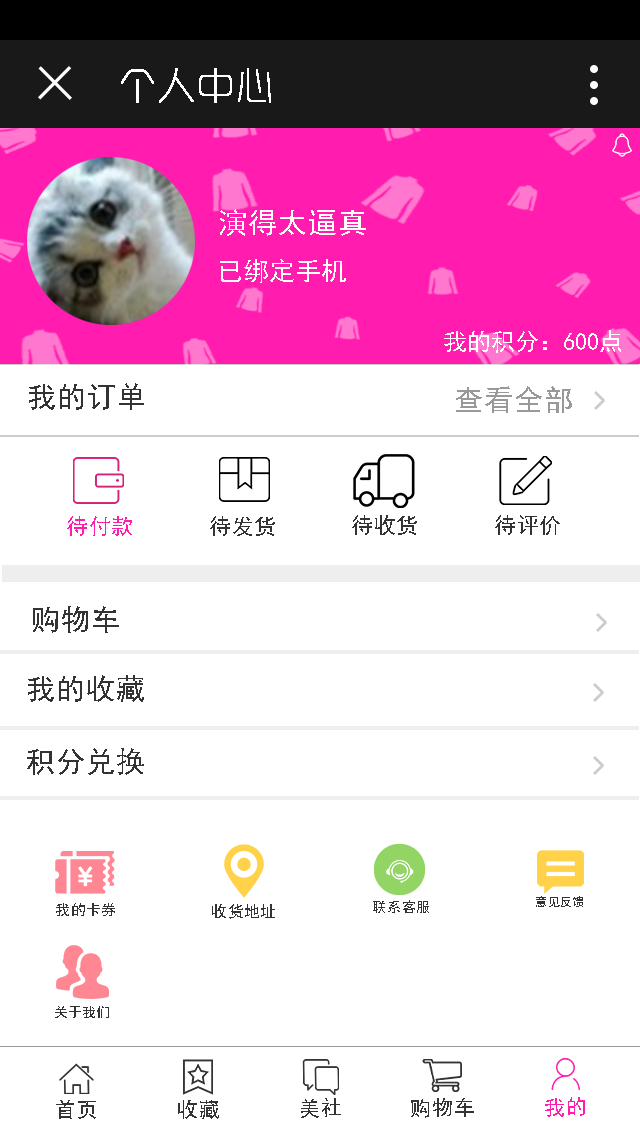
<style>
.page{position:relative;width:640px;height:1136px;background:#ffffff}
.page>*{position:absolute;margin:0}
.t1{font:38px "RTWSYueGoG0v1-ExLight";color:#ffffff;font-weight:bold}
.t2{font:50px "SimHei";color:#ffffff}
.t3{font:26px "SimHei";color:#ffffff}
.t4{font:24px "SimHei";color:#ffffff}
.t5{font:50px "SimHei";color:#333333}
.t6{font:50px "SimHei";color:#999999}
.t7{font:37.6px "SimHei";color:#ff1cae}
.t8{font:37.5px "SimHei";color:#333333}
.t9{font:37.4px "SimHei";color:#333333}
.t10{font:25.2px "SimHei";color:#333333}
.t11{font:27.1px "SimHei";color:#333333}
.t12{font:24.3px "SimHei";color:#333333}
.t13{font:20.3px "SimHei";color:#333333}
.t14{font:23.6px "SimHei";color:#333333}
.t15{font:36px "SimHei";color:#ff1cae}
.t16{font:36px "SimHei";color:#333333}
</style>
<div class="page">
<p class="t1" style="left:121px;top:68px;width:150px;height:35px">个人中心</p>
<p class="t2" style="left:220px;top:209px;width:146px;height:27px">演得太逼真</p>
<p class="t3" style="left:220px;top:259px;width:126px;height:24px">已绑定手机</p>
<p class="t4" style="left:444px;top:330px;width:177px;height:23px">我的积分：600点</p>
<p class="t5" style="left:29px;top:383px;width:115px;height:27px">我的订单</p>
<p class="t6" style="left:456px;top:386px;width:116px;height:27px">查看全部</p>
<p class="t7" style="left:67px;top:516px;width:65px;height:20px">待付款</p>
<p class="t8" style="left:210px;top:516px;width:65px;height:20px">待发货</p>
<p class="t8" style="left:352px;top:515px;width:65px;height:20px">待收货</p>
<p class="t9" style="left:495px;top:515px;width:65px;height:20px">待评价</p>
<p class="t5" style="left:33px;top:606px;width:86px;height:27px">购物车</p>
<p class="t5" style="left:28px;top:675px;width:116px;height:27px">我的收藏</p>
<p class="t5" style="left:27px;top:748px;width:117px;height:27px">积分兑换</p>
<p class="t10" style="left:56px;top:903px;width:59px;height:13px">我的卡券</p>
<p class="t11" style="left:212px;top:904px;width:63px;height:15px">收货地址</p>
<p class="t12" style="left:373px;top:900px;width:56px;height:13px">联系客服</p>
<p class="t13" style="left:536px;top:896px;width:47px;height:11px">意见反馈</p>
<p class="t14" style="left:55px;top:1006px;width:54px;height:12px">关于我们</p>
<p class="t15" style="left:545px;top:1097px;width:40px;height:20px;rotate:-1deg">我的</p>
<p class="t16" style="left:56px;top:1100px;width:40px;height:19px;rotate:-1deg">首页</p>
<p class="t16" style="left:178px;top:1100px;width:41px;height:19px;rotate:-1deg">收藏</p>
<p class="t16" style="left:301px;top:1098px;width:40px;height:20px;rotate:-1deg">美社</p>
<p class="t16" style="left:411px;top:1098px;width:63px;height:20px;rotate:-1deg">购物车</p>
</div>
